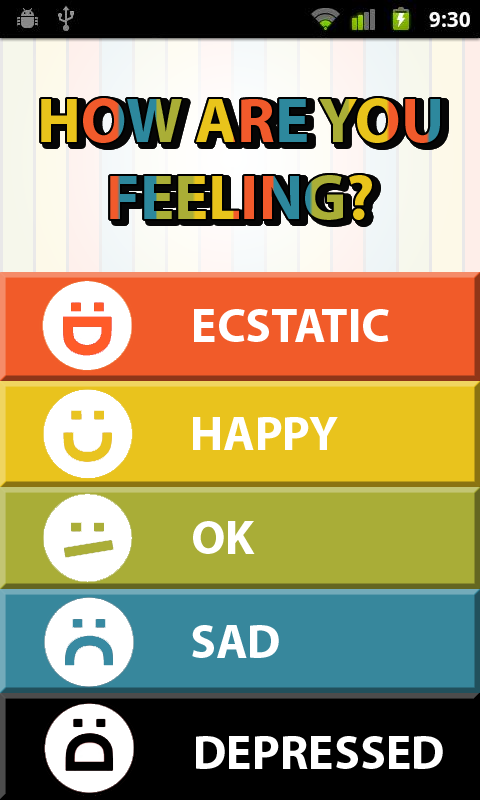
<style>
.page{position:relative;width:480px;height:800px}
.page>*{position:absolute;margin:0}
.t1{font:48px "MyriadPro-Bold";color:#ffffff}
</style>
<div class="page">
<p class="t1" style="left:194px;top:309px;width:195px;height:33px">ECSTATIC</p>
<p class="t1" style="left:193px;top:417px;width:145px;height:33px">HAPPY</p>
<p class="t1" style="left:193px;top:521px;width:62px;height:33px">OK</p>
<p class="t1" style="left:192px;top:625px;width:87px;height:33px">SAD</p>
<p class="t1" style="left:196px;top:736px;width:247px;height:33px">DEPRESSED</p>
</div>
